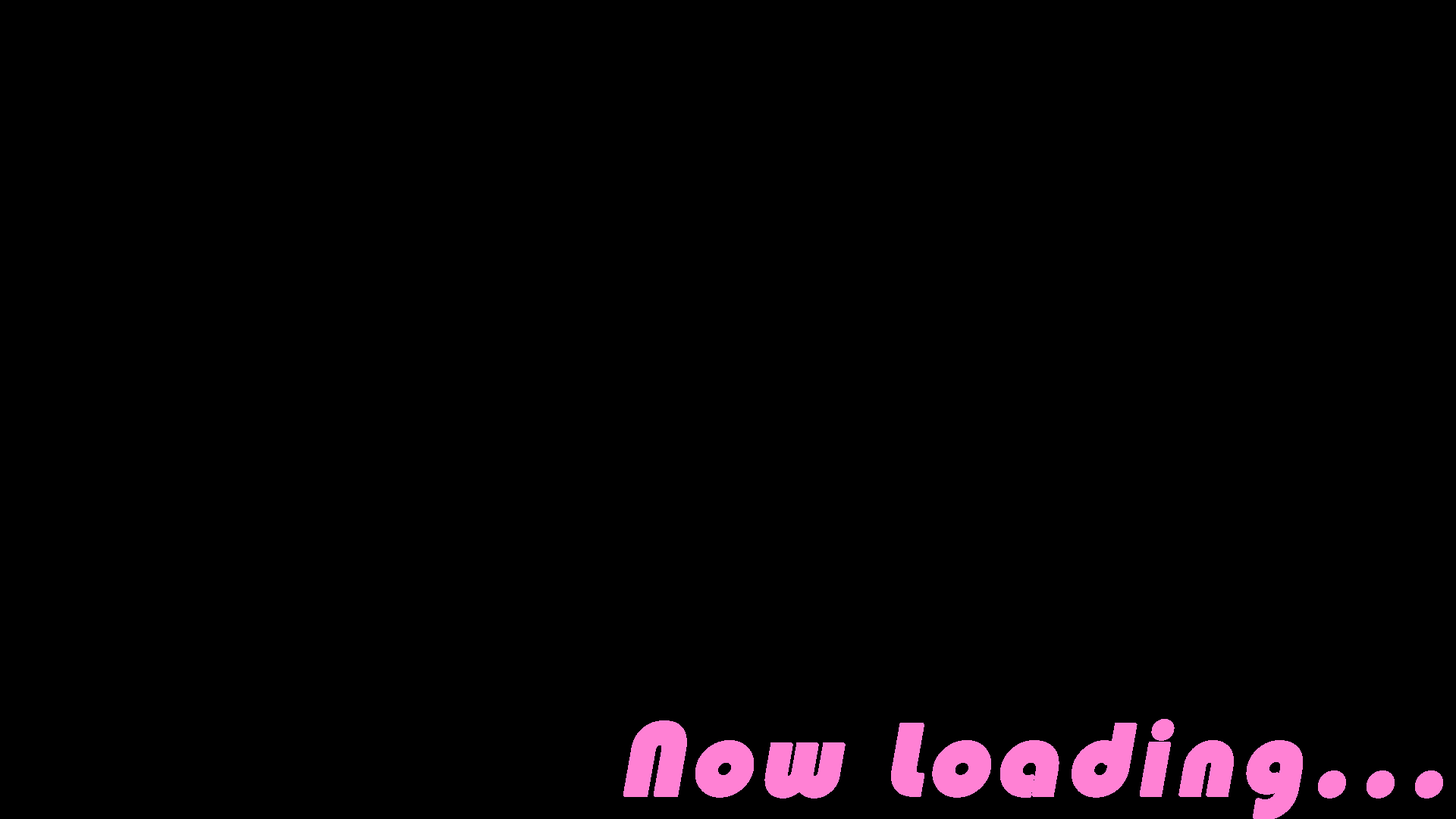
<style>
.page{position:relative;width:1456px;height:819px;background:#000000}
.page>*{position:absolute;margin:0}
.t1{font:106.2px "Bauhaus93";letter-spacing:0.05em;color:#ff81d4;font-weight:bold;font-style:italic}
</style>
<div class="page">
<p class="t1" style="left:623px;top:719px;width:820px;height:102px">Now Loading...</p>
</div>
